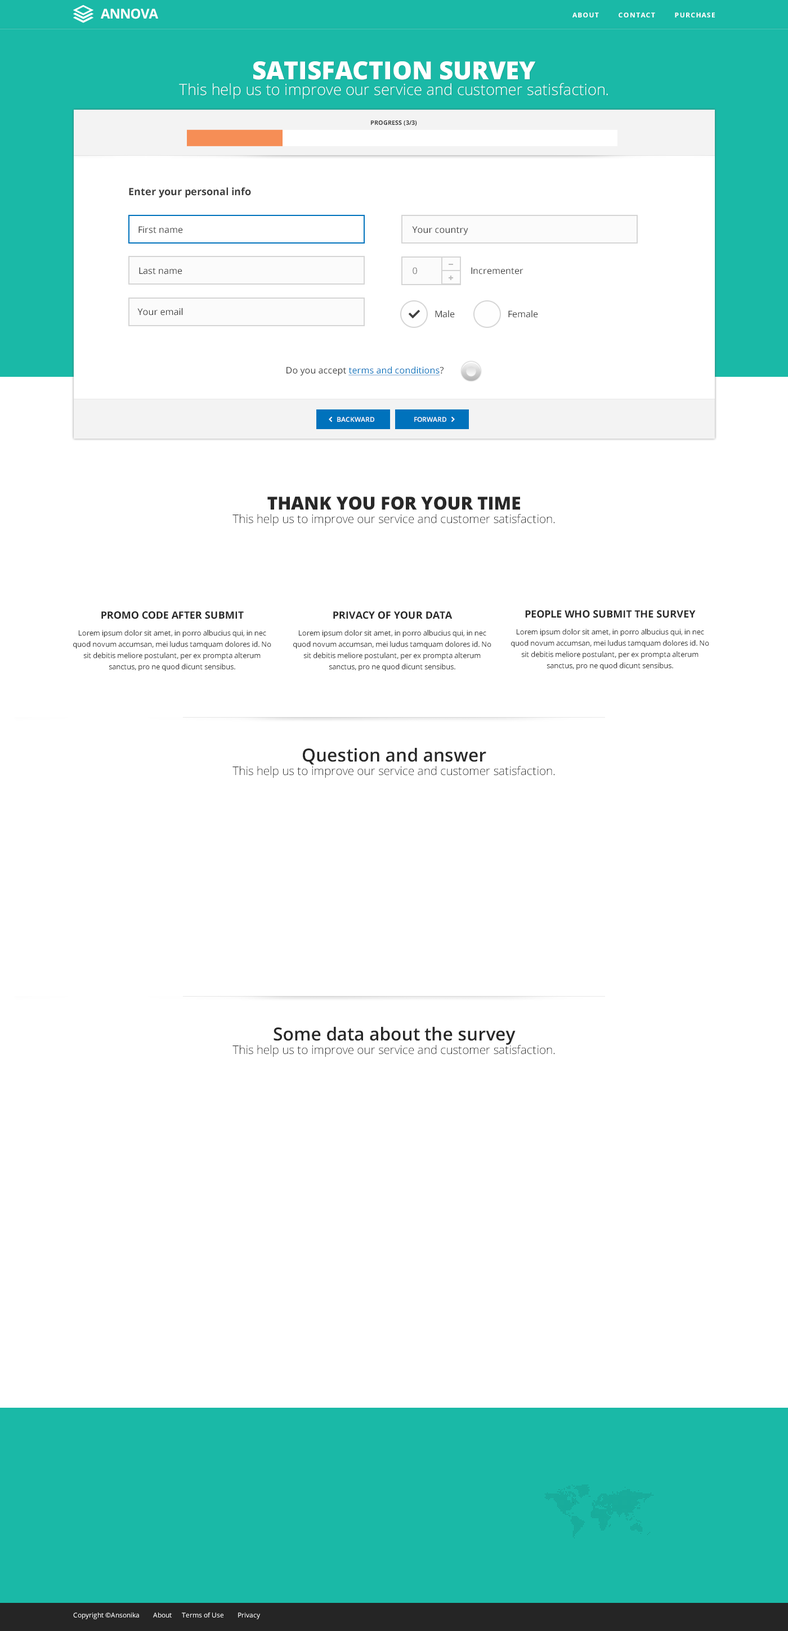
<style>
.page{position:relative;width:788px;height:1631px;background:#ffffff}
.page>*{position:absolute;margin:0}
.t1{font:13.5px "OpenSans-Bold";letter-spacing:-0.04em;color:#ffffff;text-transform:uppercase}
.t2{font:6.8px "OpenSans-Bold";letter-spacing:0.1em;color:#ffffff;text-transform:uppercase}
.t3{font:15.6px/15.6px "OpenSans-Light";color:#ffffff}
.t4{font:24.9px/15.6px "OpenSans-Extrabold";color:#ffffff;text-transform:uppercase}
.t5{font:6.2px "OpenSans-Bold";color:#3c3c3c;text-transform:uppercase}
.t6{font:10.1px "OpenSans-Bold";color:#3c3c3c}
.t7{font:9px "OpenSans";color:#3c3c3c}
.t8{font:9px "OpenSans";color:#737373}
.t9{font:8.4px "Arial-BoldMT";letter-spacing:-0.025em;color:#bababa}
.t10{font:9px "OpenSans";color:#0072bc;text-decoration:underline}
.t11{font:6.8px "OpenSans-Semibold";color:#ffffff;text-transform:uppercase}
.t12{font:11.8px/13.5px "OpenSans-Light";color:#282828}
.t13{font:18px/13.5px "OpenSans-Extrabold";color:#282828;text-transform:uppercase}
.t14{font:7.3px/11.2px "OpenSans";color:#2d2d2d}
.t15{font:10.1px/20px "OpenSans-Bold";color:#282828;text-transform:uppercase}
.t16{font:7.3px/16.9px "OpenSans";color:#2d2d2d}
.t17{font:18px/13.5px "OpenSans-Semibold";color:#282828}
.t18{font:6.8px "OpenSans";color:#ffffff}
</style>
<div class="page">
<p class="t1" style="left:101px;top:8px;width:57px;height:11px">annova</p>
<p class="t2" style="left:572px;top:12px;width:142px;height:5px">ABOUT        CONTACT        PURCHASE</p>
<p class="t3" style="left:179px;top:61px;width:429px;height:38px;text-align:center"><span class="t4">satisfaction survey<br></span>This help us to improve our service and customer satisfaction.</p>
<p class="t5" style="left:371px;top:120px;width:46px;height:6px">Progress (3/3)</p>
<p class="t6" style="left:129px;top:187px;width:122px;height:11px">Enter your personal info</p>
<p class="t7" style="left:138px;top:226px;width:45px;height:7px">First name</p>
<p class="t7" style="left:412px;top:226px;width:56px;height:9px">Your country</p>
<p class="t7" style="left:139px;top:267px;width:43px;height:7px">Last name</p>
<p class="t8" style="left:412px;top:267px;width:5px;height:7px">0</p>
<p class="t7" style="left:471px;top:267px;width:52px;height:7px">Incrementer</p>
<p class="t9" style="left:448px;top:276px;width:5px;height:4px">+</p>
<p class="t7" style="left:137px;top:308px;width:46px;height:8px">Your email</p>
<p class="t7" style="left:435px;top:310px;width:19px;height:8px">Male</p>
<p class="t7" style="left:508px;top:310px;width:30px;height:8px">Female</p>
<p class="t10" style="left:286px;top:366px;width:157px;height:10px"><span class="t7">Do you accept </span>terms and conditions<span class="t7">?</span></p>
<p class="t11" style="left:337px;top:417px;width:37px;height:5px">BACKWARD</p>
<p class="t11" style="left:414px;top:417px;width:32px;height:5px">FORWARD</p>
<p class="t12" style="left:232px;top:496px;width:323px;height:30px;text-align:center"><span class="t13">THANK YOU FOR YOUR TIME<br></span>This help us to improve our service and customer satisfaction.</p>
<p class="t14" style="left:73px;top:611px;width:198px;height:60px;text-align:center"><span class="t15">promo code after submit<br></span><span class="t16">Lorem ipsum dolor sit amet, in porro albucius qui, in nec </span>quod novum accumsan, mei ludus tamquam dolores id. No sit debitis meliore postulant, per ex prompta alterum <br>sanctus, pro ne quod dicunt sensibus.</p>
<p class="t14" style="left:293px;top:611px;width:198px;height:60px;text-align:center"><span class="t15">privacy of your data<br></span><span class="t16">Lorem ipsum dolor sit amet, in porro albucius qui, in nec </span>quod novum accumsan, mei ludus tamquam dolores id. No sit debitis meliore postulant, per ex prompta alterum <br>sanctus, pro ne quod dicunt sensibus.</p>
<p class="t14" style="left:511px;top:610px;width:198px;height:60px;text-align:center"><span class="t15">people who submit the survey<br></span><span class="t16">Lorem ipsum dolor sit amet, in porro albucius qui, in nec </span>quod novum accumsan, mei ludus tamquam dolores id. No sit debitis meliore postulant, per ex prompta alterum <br>sanctus, pro ne quod dicunt sensibus.</p>
<p class="t12" style="left:232px;top:748px;width:323px;height:30px;text-align:center"><span class="t17">Question and answer<br></span>This help us to improve our service and customer satisfaction.</p>
<p class="t12" style="left:232px;top:1027px;width:323px;height:30px;text-align:center"><span class="t17">Some data about the survey<br></span>This help us to improve our service and customer satisfaction.</p>
<p class="t18" style="left:73px;top:1613px;width:187px;height:6px">Copyright ©Ansonika        About      Terms of Use        Privacy</p>
</div>
